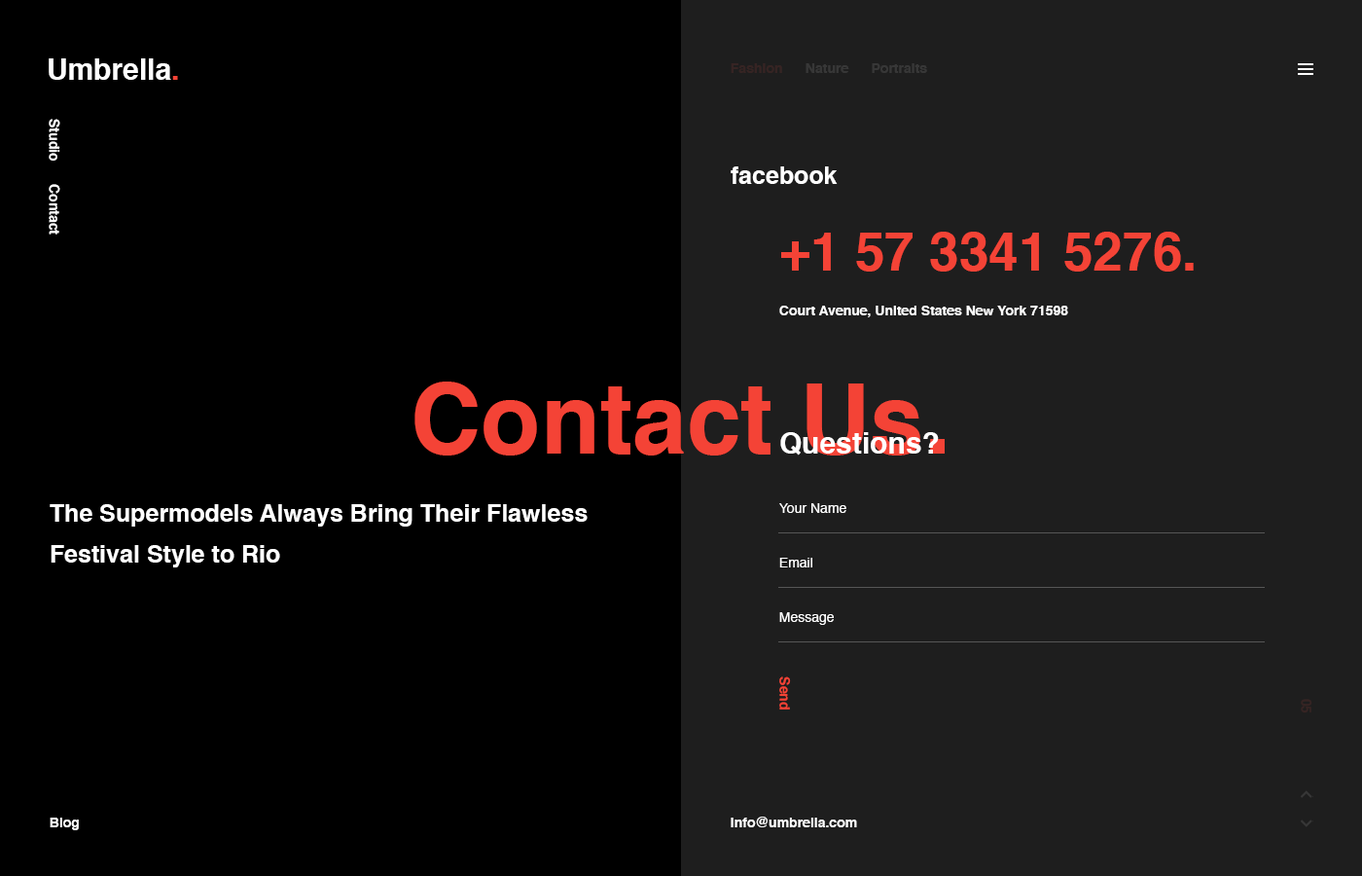
<style>
.page{position:relative;width:1362px;height:876px;background:#000000}
.page>*{position:absolute;margin:0}
.t1{font:29.2px "Helvetica-Bold";color:#ffffff}
.t2{font:29.2px "Helvetica-Bold";color:#f44336}
.t3{font:13.6px "Helvetica-Bold";color:#373737}
.t4{font:13.6px "Helvetica-Bold";color:#ffffff}
.t5{font:24.3px "Helvetica-Bold";color:#ffffff}
.t6{font:53.5px "Helvetica-Bold";color:#f44336}
.t7{font:97.3px "Helvetica-Bold";color:#f44336}
.t8{font:24.3px/40.9px "Helvetica-Bold";color:#ffffff}
.t9{font:13.6px "Helvetica";color:#ffffff}
.t10{font:13.6px "Helvetica-Bold";color:#f44336}
.t11{font:13.6px "Helvetica-Bold";color:#362423}
</style>
<div class="page">
<p class="t1" style="left:49px;top:58px;width:129px;height:22px">Umbrella<span class="t2">.</span></p>
<p class="t3" style="left:731px;top:63px;width:196px;height:10px">Fashion      Nature      Portraits</p>
<p class="t4" style="left:49px;top:119px;width:11px;height:115px;rotate:90deg">Studio      Contact</p>
<p class="t5" style="left:731px;top:166px;width:107px;height:18px">facebook</p>
<p class="t6" style="left:781px;top:232px;width:413px;height:39px">+1 57 3341 5276.</p>
<p class="t4" style="left:779px;top:305px;width:289px;height:12px">Court Avenue, United States New York 71598</p>
<p class="t7" style="left:414px;top:381px;width:531px;height:74px">Contact Us.</p>
<p class="t1" style="left:780px;top:432px;width:159px;height:23px">Questions?</p>
<p class="t8" style="left:50px;top:504px;width:538px;height:63px">The Supermodels Always Bring Their Flawless Festival Style to Rio</p>
<p class="t9" style="left:779px;top:503px;width:67px;height:10px">Your Name</p>
<p class="t9" style="left:779px;top:557px;width:33px;height:10px">Email</p>
<p class="t9" style="left:779px;top:612px;width:55px;height:13px">Message</p>
<p class="t10" style="left:779px;top:676px;width:12px;height:33px;rotate:90deg">Send</p>
<p class="t11" style="left:1301px;top:698px;width:11px;height:15px;rotate:90deg">05</p>
<p class="t4" style="left:50px;top:817px;width:29px;height:13px">Blog</p>
<p class="t4" style="left:731px;top:816px;width:126px;height:11px">info@umbrella.com</p>
</div>
